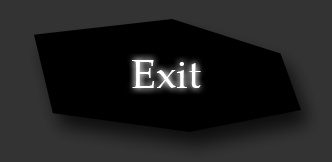
<style>
.page{position:relative;width:332px;height:162px;background:#333333}
.page>*{position:absolute;margin:0}
.t1{font:40px "BookAntiqua";color:#ffffff}
</style>
<div class="page">
<p class="t1" style="left:132px;top:60px;width:69px;height:28px">Exit</p>
</div>
